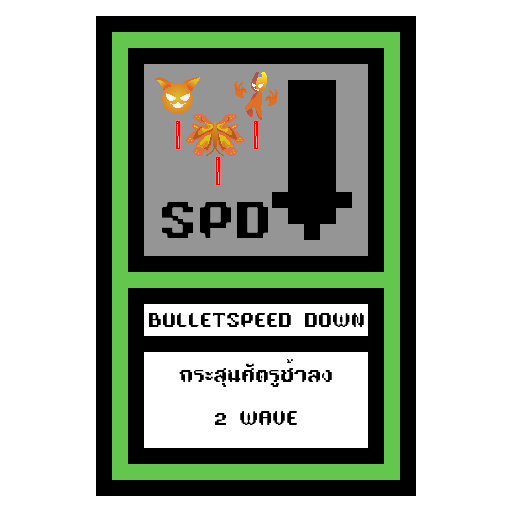
<style>
.page{position:relative;width:512px;height:512px;background:#ffffff}
.page>*{position:absolute;margin:0}
.t1{font:48px "TA16BIT-Regular";color:#000000}
.t2{font:18px "TA16BIT-Regular";color:#000000}
</style>
<div class="page">
<p class="t1" style="left:162px;top:202px;width:106px;height:36px">SPD</p>
<p class="t2" style="left:149px;top:313px;width:215px;height:14px">BULLETSPEED DOWN</p>
<p class="t2" style="left:179px;top:359px;width:153px;height:66px;text-align:center">กระสุนศัตรูช้าลง<br><br>2 WAVE</p>
</div>
